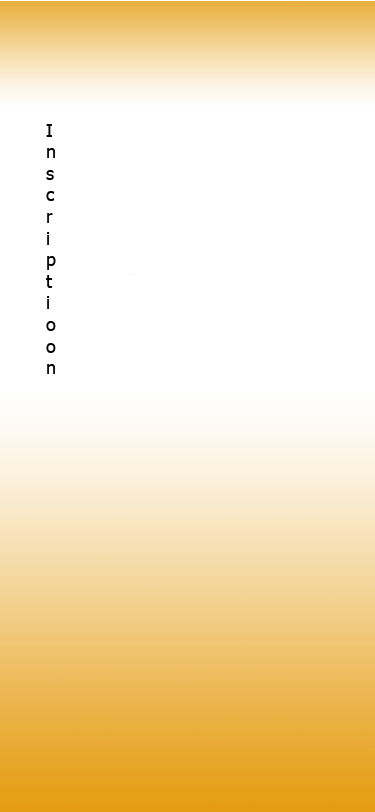
<style>
.page{position:relative;width:375px;height:812px;background:#ffffff}
.page>*{position:absolute;margin:0}
.t1{font:18px "Tahoma";color:#000000}
</style>
<div class="page">
<p class="t1" style="left:46px;top:124px;width:10px;height:250px">I<br>n<br>s<br>c<br>r<br>i<br>p<br>t<br>i<br>o<br>o<br>n</p>
</div>
